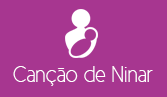
<style>
.page{position:relative;width:167px;height:97px;background:#a73690}
.page>*{position:absolute;margin:0}
.t1{font:22.7px "CicleFina";color:#ffffff}
</style>
<div class="page">
<p class="t1" style="left:13px;top:66px;width:140px;height:20px">Canção de Ninar</p>
</div>
